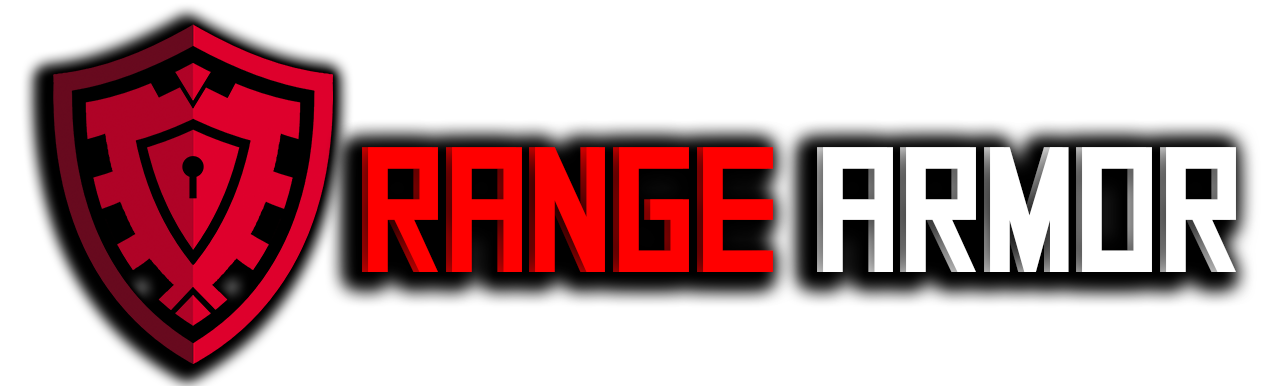
<style>
.page{position:relative;width:1280px;height:386px;background:#ffffff}
.page>*{position:absolute;margin:0}
.t1{font:177.7px "SquareFont";color:#ff0000;scale:0.81 1}
.t2{font:177.7px "SquareFont";color:#ffffff;scale:0.81 1}
</style>
<div class="page">
<p class="t1" style="left:362px;top:147px;width:868px;height:125px">RANGE <span class="t2">ARMOR</span></p>
<p class="t1" style="left:368px;top:147px;width:868px;height:125px">RANGE <span class="t2">ARMOR</span></p>
</div>
